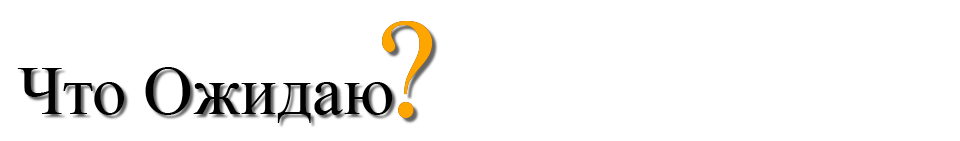
<style>
.page{position:relative;width:960px;height:141px;background:#ffffff}
.page>*{position:absolute;margin:0}
.t1{font:138.6px "TimesNewRomanPSMT";color:#ffa500}
.t2{font:69px "TimesNewRomanPSMT";color:#000000}
</style>
<div class="page">
<p class="t1" style="left:382px;top:21px;width:51px;height:97px">?</p>
<p class="t1" style="left:382px;top:21px;width:51px;height:97px">?</p>
<p class="t2" style="left:17px;top:67px;width:376px;height:56px">Что Ожидаю</p>
</div>
